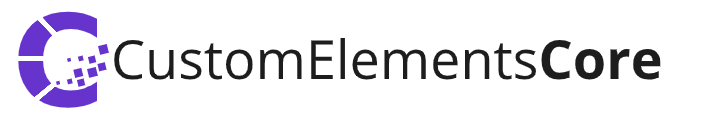
<style>
.page{position:relative;width:716px;height:129px;background:#ffffff}
.page>*{position:absolute;margin:0}
.t1{font:54px "OpenSans-Regular";color:#1d1d1d}
.t2{font:54px "OpenSans-Bold";color:#1d1d1d}
</style>
<div class="page">
<p class="t1" style="left:114px;top:37px;width:547px;height:43px">CustomElements<span class="t2">Core</span></p>
</div>
